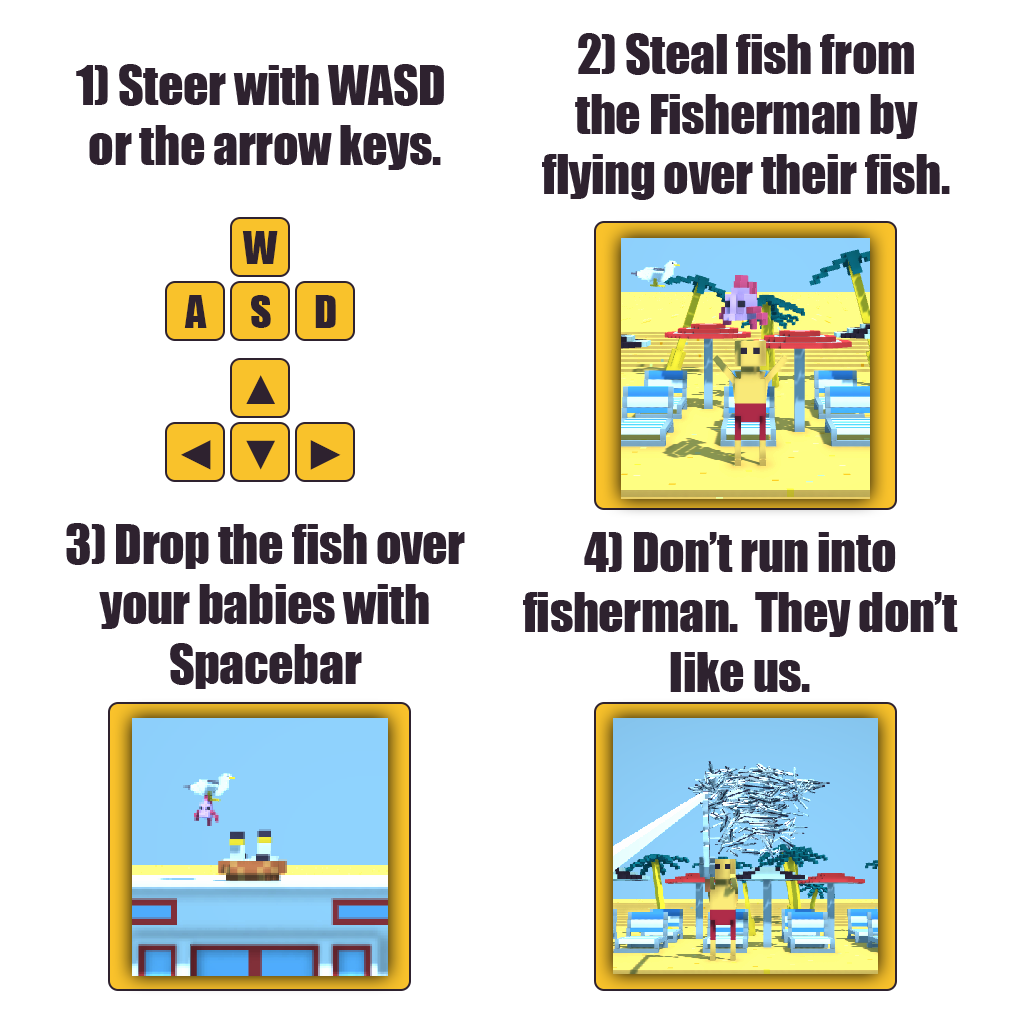
<style>
.page{position:relative;width:1024px;height:1024px;background:#ffffff}
.page>*{position:absolute;margin:0}
.t1{font:50px "Impact";letter-spacing:-0.01em;color:#2e222f}
.t2{font:41.7px "Impact";letter-spacing:-0.01em;color:#2e222f}
</style>
<div class="page">
<p class="t1" style="left:542px;top:33px;width:408px;height:167px;text-align:center">2) Steal fish from<br>the Fisherman by<br>flying over their fish.</p>
<p class="t1" style="left:76px;top:64px;width:368px;height:106px;text-align:center">1) Steer with WASD <br>or the arrow keys.</p>
<p class="t2" style="left:242px;top:231px;width:36px;height:33px">W</p>
<p class="t2" style="left:184px;top:295px;width:23px;height:33px">A</p>
<p class="t2" style="left:251px;top:295px;width:20px;height:33px">S</p>
<p class="t2" style="left:315px;top:295px;width:21px;height:33px">D</p>
<p class="t2" style="left:246px;top:375px;width:29px;height:29px">▲</p>
<p class="t2" style="left:181px;top:440px;width:30px;height:30px">◄</p>
<p class="t2" style="left:246px;top:440px;width:29px;height:30px">▼</p>
<p class="t2" style="left:310px;top:440px;width:31px;height:30px">►</p>
<p class="t1" style="left:66px;top:523px;width:399px;height:166px;text-align:center">3) Drop the fish over<br>your babies with<br>Spacebar</p>
<p class="t1" style="left:523px;top:532px;width:435px;height:160px;text-align:center">4) Don’t run into<br>fisherman.  They don’t<br>like us.</p>
</div>
